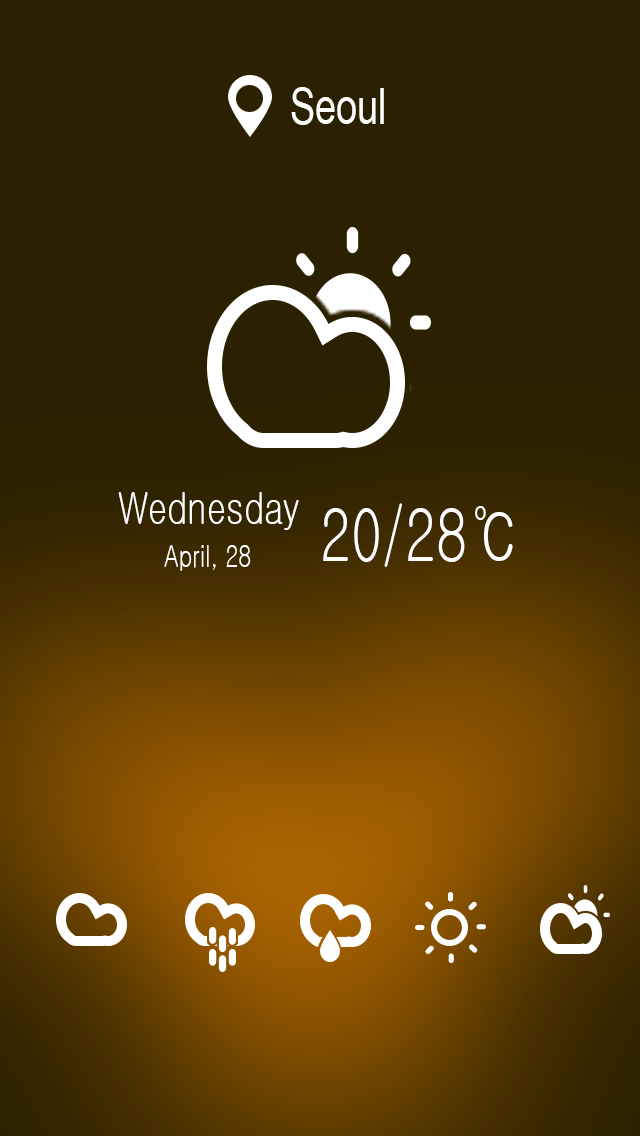
<style>
.page{position:relative;width:640px;height:1136px;background:#2b2100}
.page>*{position:absolute;margin:0}
.t1{font:50px "ArialMT";color:#fefefe;scale:0.75 1}
.t2{font:45px "Gulim";color:#fefefe;scale:0.75 1}
.t3{font:72px "Gulim";color:#fefefe;scale:0.75 1}
.t4{font:30px "Gulim";color:#fefefe;scale:0.75 1}
</style>
<div class="page">
<p class="t1" style="left:291px;top:87px;width:93px;height:38px">Seoul</p>
<p class="t2" style="left:118px;top:492px;width:181px;height:38px">Wednesday</p>
<p class="t3" style="left:323px;top:503px;width:190px;height:64px">20/28℃</p>
<p class="t4" style="left:164px;top:545px;width:87px;height:26px">April, 28</p>
</div>
